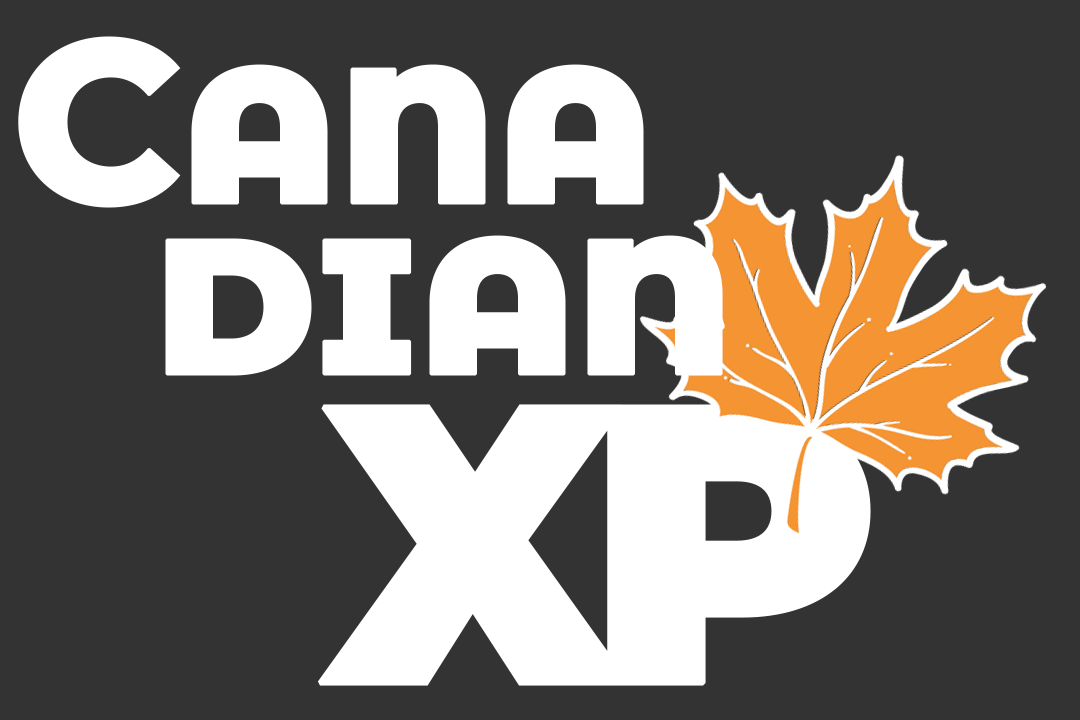
<style>
.page{position:relative;width:1080px;height:720px;background:#333333}
.page>*{position:absolute;margin:0}
.t1{font:231px "Montserrat-ExtraBold";letter-spacing:-0.04em;color:#ffffff;font-variant:small-caps;font-weight:bold}
.t2{font:394.8px "Montserrat-Black";letter-spacing:-0.1em;color:#ffffff;font-variant:small-caps;font-weight:bold}
</style>
<div class="page">
<p class="t1" style="left:18px;top:36px;width:626px;height:172px">Cana</p>
<p class="t1" style="left:165px;top:235px;width:558px;height:141px">dian</p>
<p class="t2" style="left:317px;top:404px;width:554px;height:282px">XP</p>
</div>
